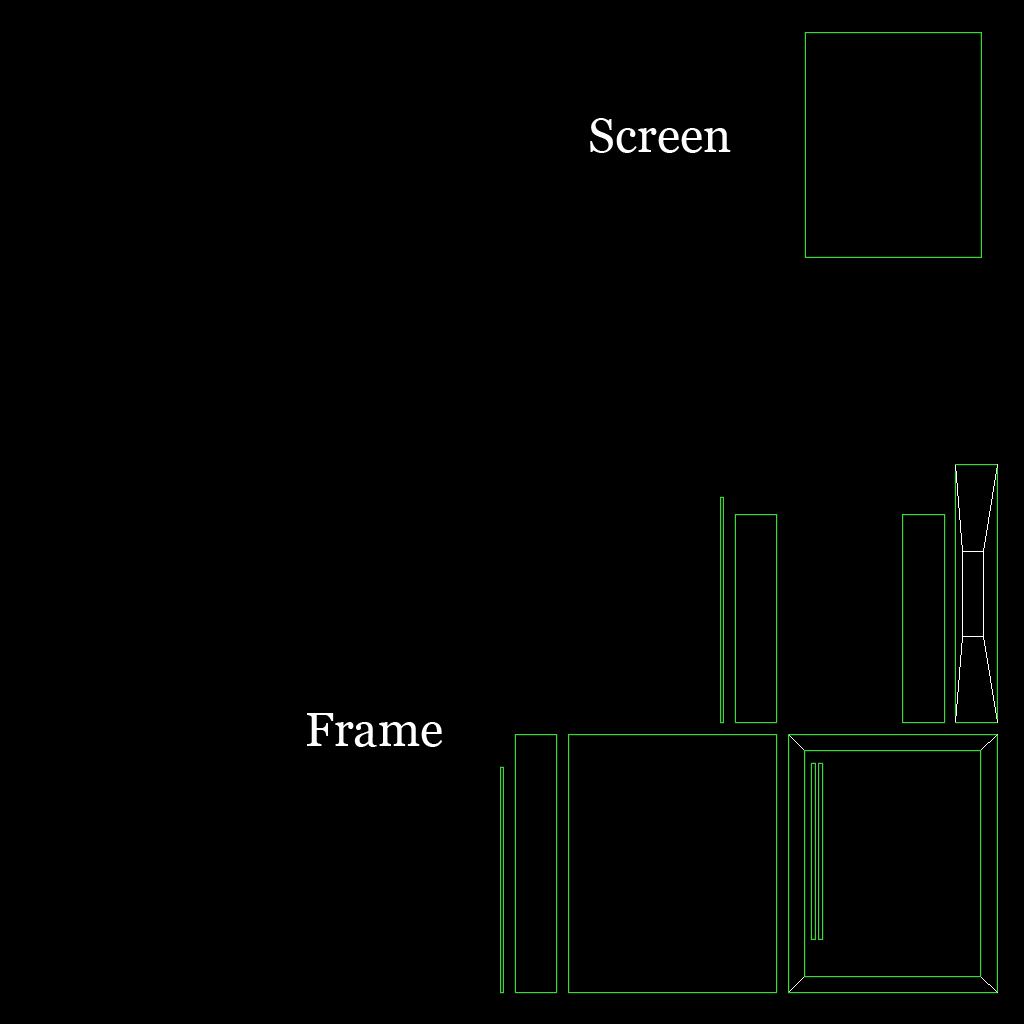
<style>
.page{position:relative;width:1024px;height:1024px;background:#000000}
.page>*{position:absolute;margin:0}
.t1{font:48px "Georgia";color:#ffffff}
</style>
<div class="page">
<p class="t1" style="left:590px;top:118px;width:141px;height:35px">Screen</p>
<p class="t1" style="left:307px;top:713px;width:136px;height:34px">Frame</p>
</div>
